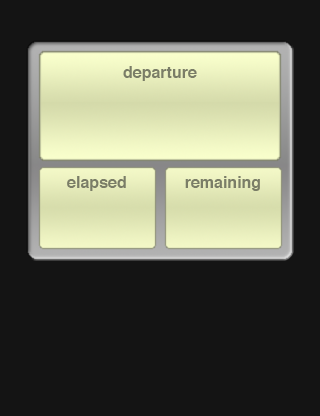
<style>
.page{position:relative;width:320px;height:416px;background:#141414}
.page>*{position:absolute;margin:0}
.t1{font:16px "Helvetica-Bold";color:#7a7d67}
</style>
<div class="page">
<p class="t1" style="left:123px;top:66px;width:74px;height:15px">departure</p>
<p class="t1" style="left:67px;top:176px;width:59px;height:15px">elapsed</p>
<p class="t1" style="left:185px;top:176px;width:75px;height:15px">remaining</p>
</div>
